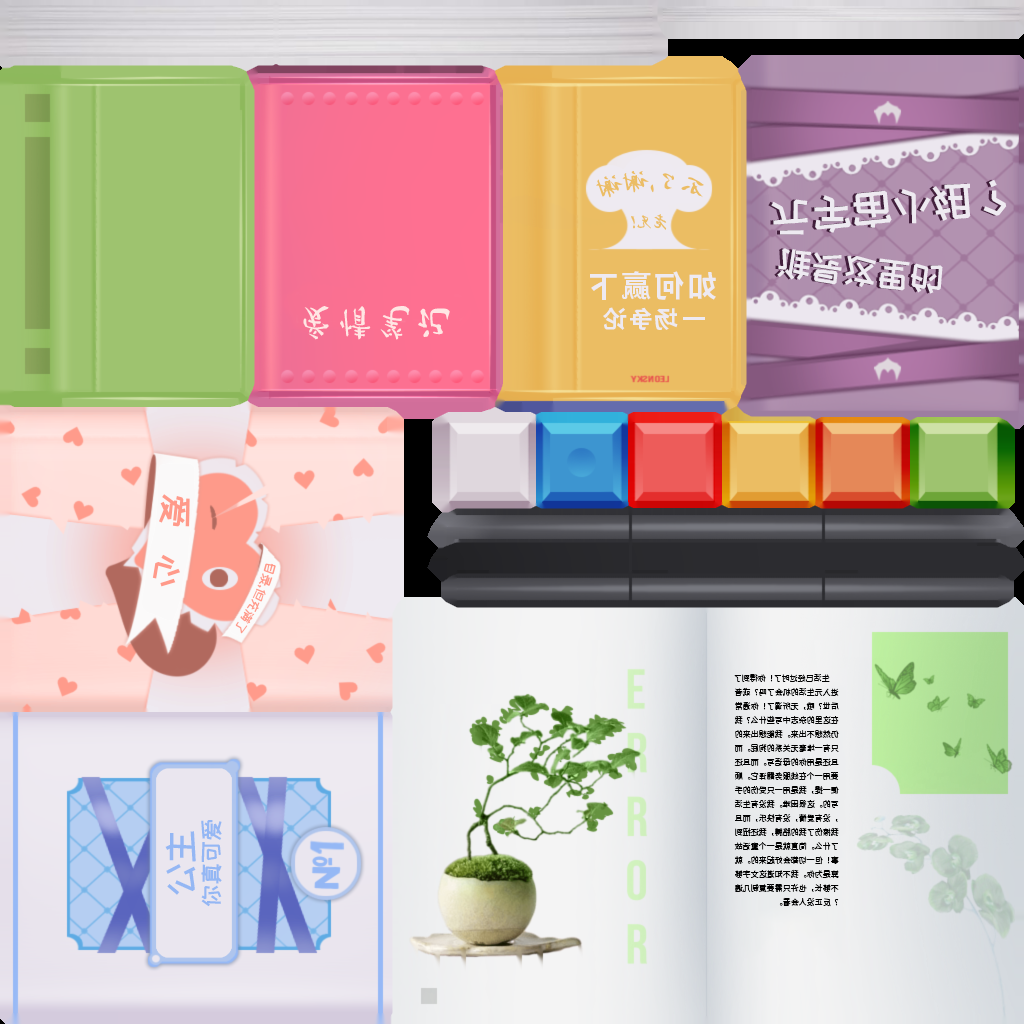
<style>
.page{position:relative;width:1024px;height:1024px}
.page>*{position:absolute;margin:0}
.t1{font:25.3px "ZhiMangXing-Regular";color:#ebbd64}
.t2{font:44.3px "ZCOOLKuaiLe-Regular";color:#eeeaf1}
.t3{font:18px "ZhiMangXing-Regular";color:#ebbd64}
.t4{font:36px "ZCOOLKuaiLe-Regular";color:#eeeaf1}
.t5{font:30px/36px "NotoSansSC-Bold";letter-spacing:0.1em;color:#eeeaf1}
.t6{font:24px/36px "NotoSansSC-Bold";letter-spacing:0.1em;color:#eeeaf1}
.t7{font:36px "MaShanZheng-Regular";letter-spacing:0.1em;color:#ffe6e4}
.t8{font:36px "ZCOOLKuaiLe-Regular";color:#ff9a8a}
.t9{font:8px/14px "NotoSansSC-Regular";color:#000000}
.t10{font:24px "ZCOOLKuaiLe-Regular";color:#94b7f4}
.t11{font:36px "ZCOOLKuaiLe-Regular";color:#94b7f4}
</style>
<div class="page">
<p class="t1" style="left:596px;top:170px;width:108px;height:28px;rotate:180deg">不了,谢谢</p>
<p class="t2" style="left:771px;top:179px;width:236px;height:56px;rotate:-6deg">元宇宙小姐？</p>
<p class="t3" style="left:631px;top:214px;width:36px;height:16px;rotate:180deg">老兄!</p>
<p class="t4" style="left:777px;top:248px;width:166px;height:46px;rotate:6deg">谁是这里的</p>
<p class="t5" style="left:590px;top:271px;width:126px;height:59px;text-align:center;rotate:180deg">如何赢下<br><span class="t6">一场争论</span></p>
<p class="t7" style="left:303px;top:306px;width:147px;height:34px">爱情笔记</p>
<p class="t8" style="left:152px;top:494px;width:38px;height:93px;rotate:98deg">爱   心</p>
<p class="t9" style="left:734px;top:673px;width:105px;height:234px;rotate:180deg">生活已经过时了！你得到了<br>进入元生活的机会了吗？或者<br>后世？哦，无所谓了！你通常<br>在这里的杂志中写些什么？我<br>仍然想不出来。我能想出来的<br>只有一堆毫无关系的狗屁。而<br>且还是用你的母语写。而且还<br>要用一个在线服务翻译它。顺<br>便一提，我是用一只受伤的手<br>写的。这很困难。我没有生活<br>，没有爱情，没有快乐，而且<br>我擦伤了我的胳膊，我还扭到<br>了什么。简直就是一个童话故<br>事！但一切都会好起来的。就<br>算是为你。我不知道这文字够<br>不够长，也许只需要复制几遍<br>？反正没人会看。</p>
<p class="t10" style="left:201px;top:820px;width:21px;height:87px;rotate:-90deg">你真可爱</p>
<p class="t11" style="left:165px;top:831px;width:31px;height:64px;rotate:-90deg">公主</p>
</div>
